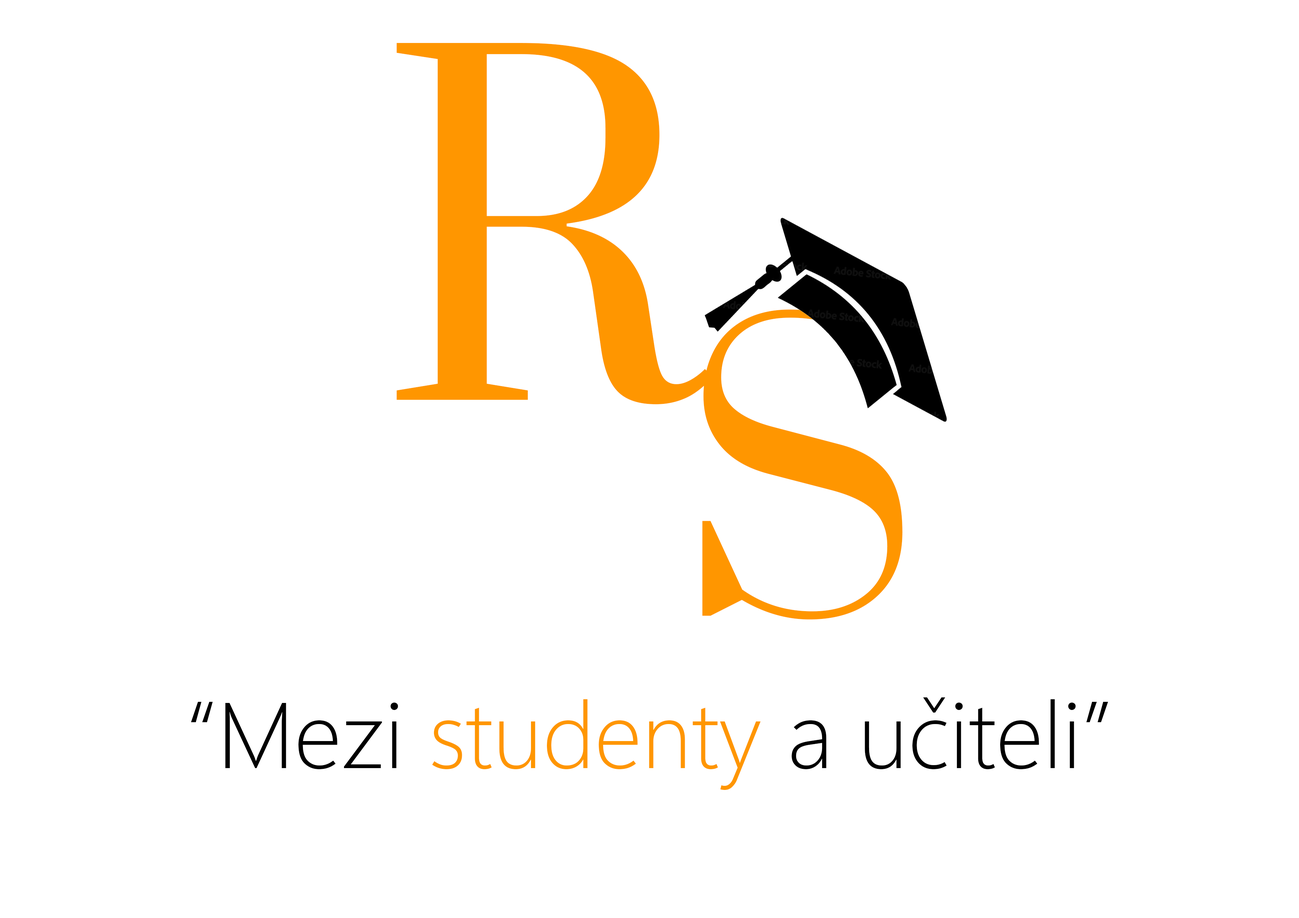
<style>
.page{position:relative;width:1299px;height:918px;background:#ffffff}
.page>*{position:absolute;margin:0}
.t1{font:446.1px "Prata-Regular";color:#ff9600}
.t2{font:369px "Prata-Regular";color:#ff9600}
.t3{font:93px "SegoeUIVariable-LightText";color:#000000}
.t4{font:93px "SegoeUIVariable-LightText";color:#ff9600}
</style>
<div class="page">
<p class="t1" style="left:397px;top:43px;width:316px;height:362px">R</p>
<p class="t2" style="left:702px;top:310px;width:200px;height:310px">S</p>
<p class="t3" style="left:191px;top:697px;width:917px;height:93px">“Mezi <span class="t4">studenty</span> a učiteli”</p>
</div>
